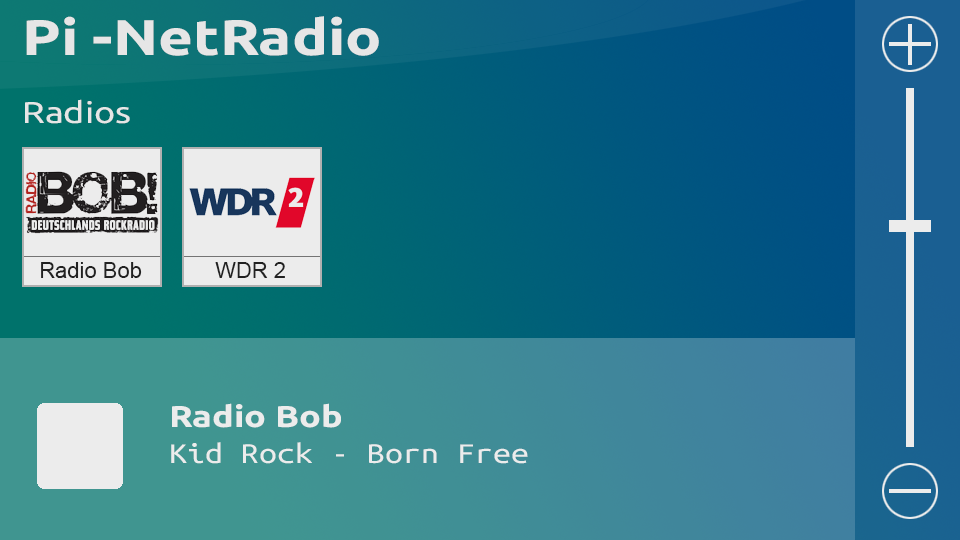
<style>
.page{position:relative;width:960px;height:540px}
.page>*{position:absolute;margin:0}
.t1{font:50px "Ubuntu-Bold";color:#e6e6e6;scale:1.2 1}
.t2{font:30px "Ubuntu-Regular";color:#e6e6e6;scale:1.2 1}
.t3{font:22px "ArialMT";color:#212121}
.t4{font:30px "UbuntuMono-Regular";color:#ececec;scale:1.2 1}
.t5{font:30px "Ubuntu-Bold";color:#ececec;scale:1.2 1}
.t6{font:30px "Ubuntu-Regular";color:#ececec;scale:1.2 1}
</style>
<div class="page">
<p class="t1" style="left:26px;top:16px;width:353px;height:40px">Pi -NetRadio</p>
<p class="t2" style="left:25px;top:99px;width:105px;height:25px">Radios</p>
<p class="t3" style="left:41px;top:262px;width:101px;height:16px">Radio Bob</p>
<p class="t3" style="left:215px;top:262px;width:70px;height:16px">WDR 2</p>
<p class="t4" style="left:171px;top:403px;width:357px;height:61px"><span class="t5">Radio Bob<br></span>Kid Rock - Born Free<br><span class="t6">Kid</span></p>
</div>
